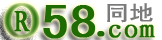
<style>
.page{position:relative;width:162px;height:40px}
.page>*{position:absolute;margin:0}
.t1{font:72px "YouYuan";font-weight:bold;scale:1.14 1}
.t2{font:48px "SimHei";letter-spacing:0.01em;color:#1f6b04;font-weight:bold;scale:1.14 1}
.t3{font:21.3px "SimHei";color:#7a7a7a;font-weight:bold;scale:1.14 1}
.t4{font:30px "KaiTi_GB2312";color:#1f6b04;font-weight:bold;scale:1.14 1}
.t5{font:26.7px "KaiTi_GB2312";color:#1f6b04;font-weight:bold;scale:1.14 1}
.t6{font:42.7px "NSimSun";letter-spacing:0.01em;color:#1f6b04;font-weight:bold;scale:1.14 1}
</style>
<div class="page">
<p class="t1" style="left:3px;top:3px;width:37px;height:35px">o</p>
<p class="t2" style="left:43px;top:5px;width:53px;height:34px">58</p>
<p class="t3" style="left:107px;top:3px;width:46px;height:20px">同地</p>
<p class="t4" style="left:14px;top:11px;width:16px;height:21px">R</p>
<p class="t5" style="left:109px;top:24px;width:46px;height:14px">com</p>
<p class="t6" style="left:97px;top:31px;width:8px;height:6px">.</p>
</div>
